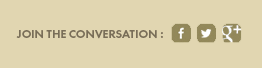
<style>
.page{position:relative;width:262px;height:68px;background:#e1d6b1}
.page>*{position:absolute;margin:0}
.t1{font:12px "Futura-DemBld";letter-spacing:0.005em;color:#796e58;text-transform:uppercase}
</style>
<div class="page">
<p class="t1" style="left:16px;top:30px;width:147px;height:9px">JOIN THE CONVERSATION :</p>
</div>
